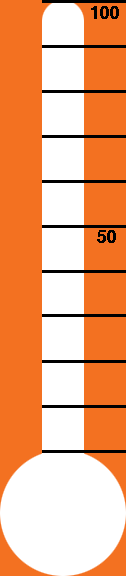
<style>
.page{position:relative;width:126px;height:576px;background:#f37121}
.page>*{position:absolute;margin:0}
.t1{font:18px "Helvetica-Bold";letter-spacing:0.005em;color:#000000}
</style>
<div class="page">
<p class="t1" style="left:91px;top:6px;width:28px;height:13px">100</p>
<p class="t1" style="left:97px;top:230px;width:19px;height:13px">50</p>
</div>
